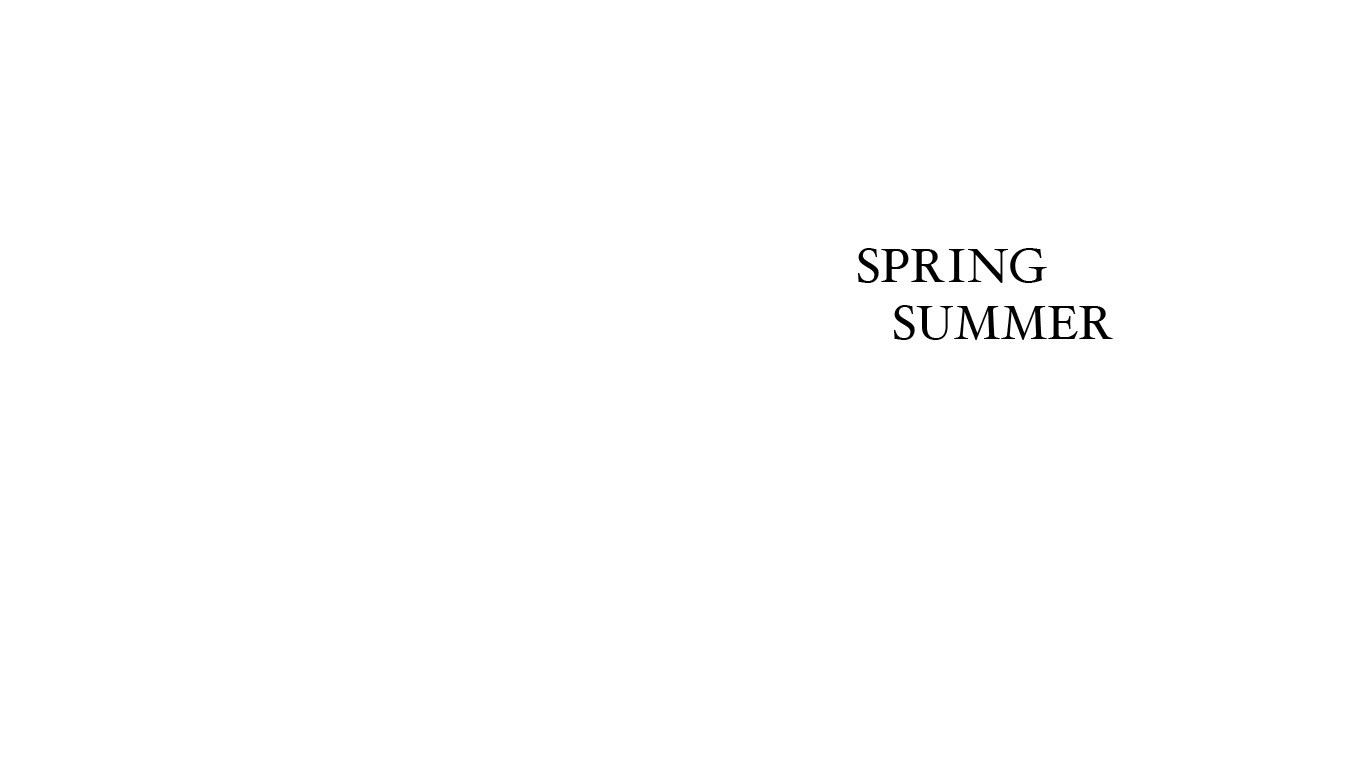
<style>
.page{position:relative;width:1366px;height:768px;background:#ffffff}
.page>*{position:absolute;margin:0}
.t1{font:48px "HoeflerText-Regular";color:#000000}
</style>
<div class="page">
<p class="t1" style="left:858px;top:248px;width:255px;height:92px">SPRING<br>   SUMMER</p>
</div>
